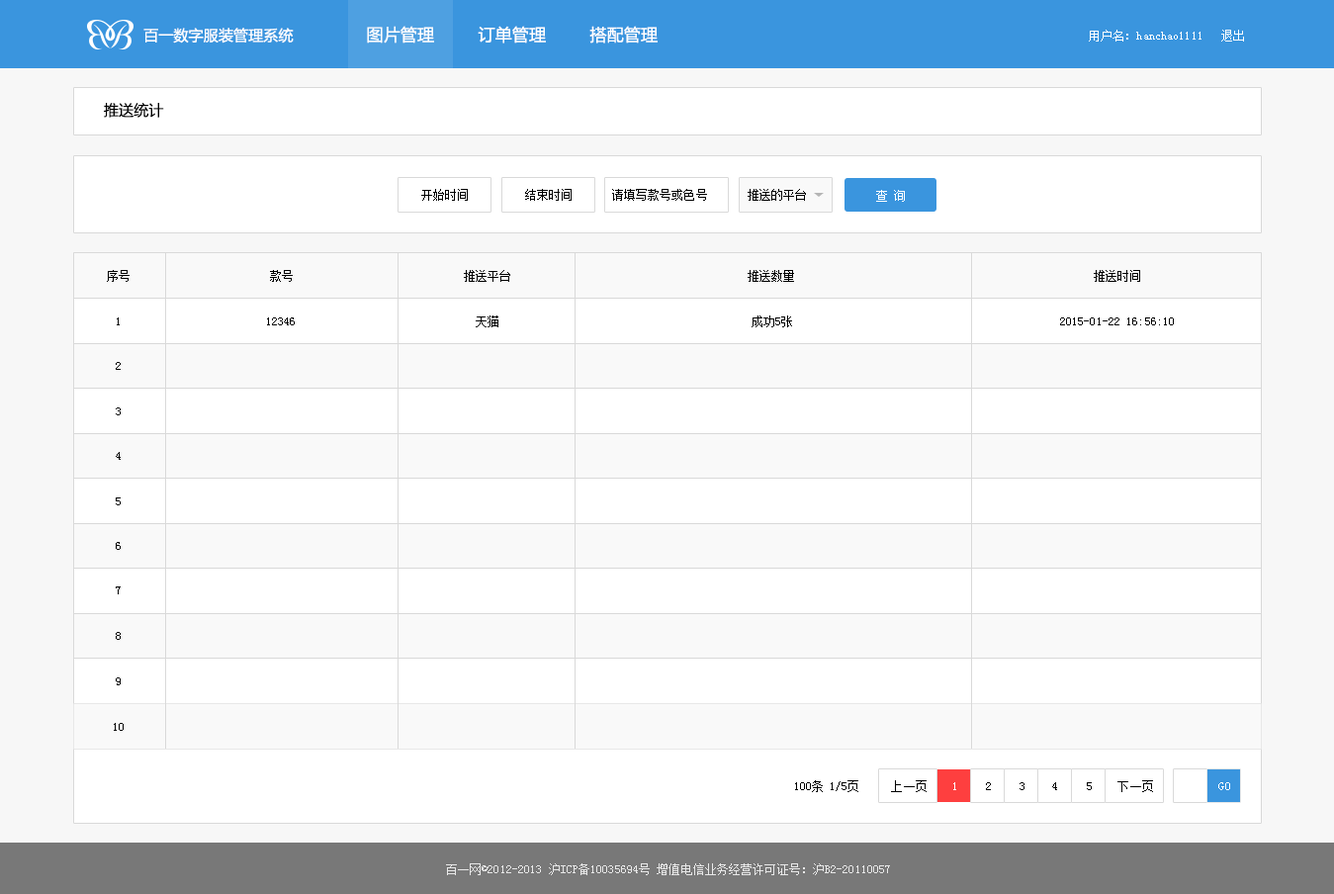
<style>
.page{position:relative;width:1334px;height:894px;background:#ffffff}
.page>*{position:absolute;margin:0}
.t1{font:14.8px "MicrosoftYaHei";letter-spacing:0.01em;color:#ffffff}
.t2{font:16.8px "MicrosoftYaHei";letter-spacing:0.01em;color:#ffffff}
.t3{font:11.9px "SimSun";letter-spacing:0.01em;color:#ffffff}
.t4{font:14.8px "MicrosoftYaHei";letter-spacing:0.01em;color:#000000}
.t5{font:11.9px "SimSun";letter-spacing:0.01em;color:#000000}
.t6{font:11.9px "SimSun";letter-spacing:0.01em;color:#e8e8e8}
</style>
<div class="page">
<p class="t1" style="left:143px;top:28px;width:151px;height:16px">百一数字服装管理系统</p>
<p class="t2" style="left:367px;top:26px;width:67px;height:18px">图片管理</p>
<p class="t2" style="left:478px;top:26px;width:68px;height:18px">订单管理</p>
<p class="t2" style="left:589px;top:26px;width:69px;height:18px">搭配管理</p>
<p class="t3" style="left:1089px;top:30px;width:112px;height:12px">用户名：hanchao1111</p>
<p class="t3" style="left:1221px;top:30px;width:23px;height:12px">退出</p>
<p class="t4" style="left:104px;top:103px;width:60px;height:15px">推送统计</p>
<p class="t5" style="left:421px;top:189px;width:47px;height:12px">开始时间</p>
<p class="t5" style="left:525px;top:189px;width:47px;height:12px">结束时间</p>
<p class="t5" style="left:612px;top:189px;width:95px;height:12px">请填写款号或色号</p>
<p class="t5" style="left:748px;top:189px;width:58px;height:12px">推送的平台</p>
<p class="t3" style="left:876px;top:190px;width:29px;height:12px">查 询</p>
<p class="t5" style="left:107px;top:270px;width:23px;height:12px">序号</p>
<p class="t5" style="left:270px;top:270px;width:23px;height:12px">款号</p>
<p class="t5" style="left:464px;top:270px;width:46px;height:12px">推送平台</p>
<p class="t5" style="left:748px;top:270px;width:46px;height:12px">推送数量</p>
<p class="t5" style="left:1094px;top:270px;width:46px;height:12px">推送时间</p>
<p class="t5" style="left:117px;top:317px;width:3px;height:8px">1</p>
<p class="t5" style="left:267px;top:317px;width:28px;height:8px">12346</p>
<p class="t5" style="left:476px;top:315px;width:22px;height:12px">天猫</p>
<p class="t5" style="left:752px;top:315px;width:40px;height:12px">成功5张</p>
<p class="t5" style="left:1060px;top:317px;width:114px;height:8px">2015-01-22 16:56:10</p>
<p class="t5" style="left:116px;top:362px;width:5px;height:8px">2</p>
<p class="t5" style="left:116px;top:407px;width:5px;height:8px">3</p>
<p class="t5" style="left:116px;top:452px;width:5px;height:8px">4</p>
<p class="t5" style="left:116px;top:497px;width:5px;height:8px">5</p>
<p class="t5" style="left:116px;top:542px;width:5px;height:8px">6</p>
<p class="t5" style="left:116px;top:586px;width:5px;height:8px">7</p>
<p class="t5" style="left:116px;top:632px;width:5px;height:8px">8</p>
<p class="t5" style="left:116px;top:677px;width:5px;height:8px">9</p>
<p class="t5" style="left:114px;top:723px;width:10px;height:8px">10</p>
<p class="t5" style="left:795px;top:780px;width:63px;height:12px">100条 1/5页</p>
<p class="t5" style="left:891px;top:780px;width:36px;height:12px">上一页</p>
<p class="t3" style="left:953px;top:782px;width:3px;height:8px">1</p>
<p class="t5" style="left:986px;top:782px;width:5px;height:8px">2</p>
<p class="t5" style="left:1019px;top:782px;width:5px;height:8px">3</p>
<p class="t5" style="left:1052px;top:782px;width:5px;height:8px">4</p>
<p class="t5" style="left:1087px;top:782px;width:5px;height:8px">5</p>
<p class="t5" style="left:1117px;top:780px;width:36px;height:12px">下一页</p>
<p class="t3" style="left:1218px;top:782px;width:12px;height:8px">GO</p>
<p class="t6" style="left:446px;top:863px;width:444px;height:12px">百一网©2012-2013 沪ICP备10035694号 增值电信业务经营许可证号：沪B2-20110057</p>
</div>
